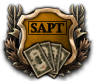
<style>
.page{position:relative;width:94px;height:81px}
.page>*{position:absolute;margin:0}
.t1{font:12px "Castellar";color:#000000;font-weight:bold}
</style>
<div class="page">
<p class="t1" style="left:31px;top:23px;width:33px;height:10px">SAPT</p>
</div>
